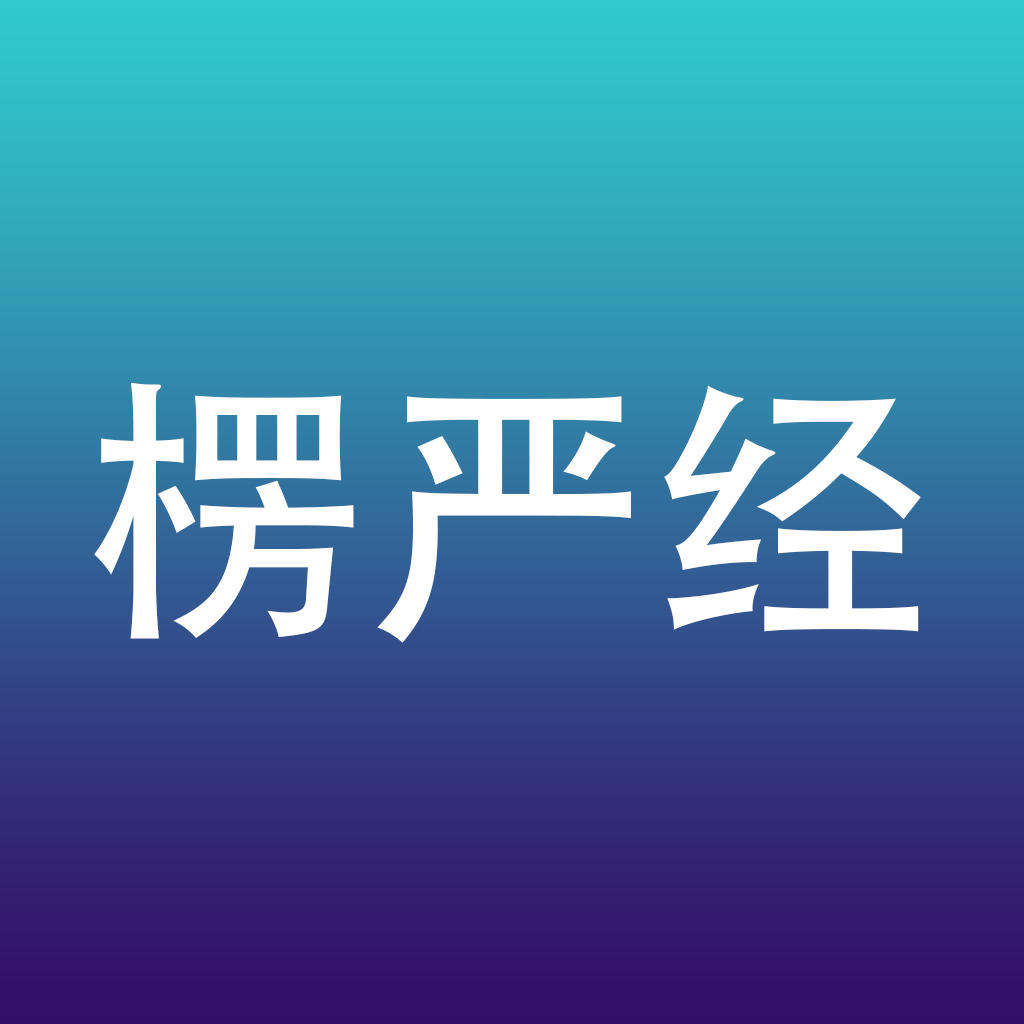
<style>
.page{position:relative;width:1024px;height:1024px}
.page>*{position:absolute;margin:0}
.t1{font:283.5px "AdobeHeitiStd-Regular";color:#ffffff}
</style>
<div class="page">
<p class="t1" style="left:94px;top:382px;width:827px;height:261px">楞严经</p>
</div>
